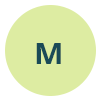
<style>
.page{position:relative;width:100px;height:100px;background:#ddeca2}
.page>*{position:absolute;margin:0}
.t1{font:29.2px "OpenSans-Bold";letter-spacing:0.03em;color:#1a4a57;scale:1.08 1}
</style>
<div class="page">
<p class="t1" style="left:36px;top:43px;width:25px;height:21px">M</p>
</div>
